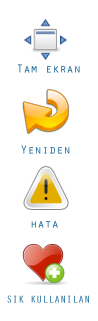
<style>
.page{position:relative;width:98px;height:321px;background:#ffffff}
.page>*{position:absolute;margin:0}
.t1{font:12px "OratorStd"}
.t2{font:10px "OratorStd";color:#0e6095}
</style>
<div class="page">
<p class="t1" style="left:17px;top:64px;width:63px;height:9px">Tam ekran</p>
<p class="t1" style="left:21px;top:145px;width:49px;height:9px">Yeniden</p>
<p class="t1" style="left:31px;top:221px;width:27px;height:7px">hata</p>
<p class="t2" style="left:7px;top:295px;width:82px;height:8px">SIK KULLANILAN</p>
</div>
